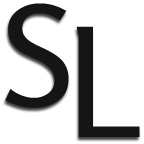
<style>
.page{position:relative;width:144px;height:144px;background:#ffffff}
.page>*{position:absolute;margin:0}
.t1{font:138.9px "Rosario-Regular";letter-spacing:-0.05em;color:#151515}
.t2{font:151.6px "Rosario-Regular";letter-spacing:-0.05em;color:#151515}
</style>
<div class="page">
<p class="t1" style="left:5px;top:3px;width:64px;height:105px">S</p>
<p class="t2" style="left:76px;top:26px;width:64px;height:111px">L</p>
</div>
